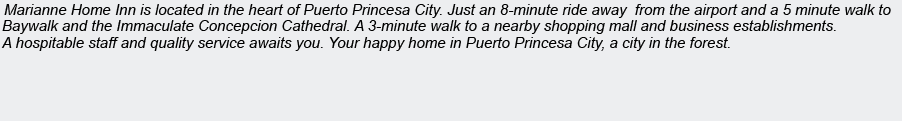
<style>
.page{position:relative;width:902px;height:121px;background:#edeef0}
.page>*{position:absolute;margin:0}
.t1{font:15px "Arial-ItalicMT";color:#000000}
</style>
<div class="page">
<p class="t1" style="left:4px;top:4px;width:887px;height:14px">Marianne Home Inn is located in the heart of Puerto Princesa City. Just an 8-minute ride away  from the airport and a 5 minute walk to</p>
<p class="t1" style="left:2px;top:20px;width:834px;height:14px">Baywalk and the Immaculate Concepcion Cathedral. A 3-minute walk to a nearby shopping mall and business establishments.</p>
<p class="t1" style="left:1px;top:37px;width:729px;height:14px">A hospitable staff and quality service awaits you. Your happy home in Puerto Princesa City, a city in the forest.</p>
</div>
